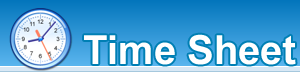
<style>
.page{position:relative;width:300px;height:72px}
.page>*{position:absolute;margin:0}
.t1{font:40px "Arial-BoldMT";color:#ffffff}
</style>
<div class="page">
<p class="t1" style="left:84px;top:34px;width:212px;height:31px">Time Sheet</p>
</div>
